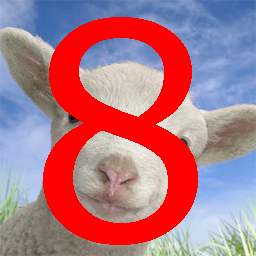
<style>
.page{position:relative;width:256px;height:256px;background:#ff0000}
.page>*{position:absolute;margin:0}
.t1{font:300px "Verdana";color:#ff0000}
</style>
<div class="page">
<p class="t1" style="left:43px;top:17px;width:155px;height:228px">8</p>
</div>
